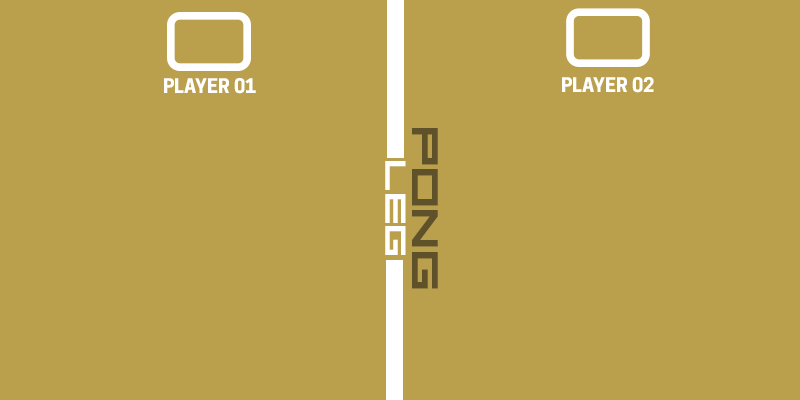
<style>
.page{position:relative;width:800px;height:400px;background:#ba9f4d}
.page>*{position:absolute;margin:0}
.t1{font:19px "CooperHewitt-Bold";color:#ffffff}
.t2{font:50px "SquareSansSerif7";color:#5f522b;text-transform:uppercase;font-weight:bold}
.t3{font:39.4px "SquareSansSerif7";color:#ffffff;text-transform:uppercase;font-weight:bold}
</style>
<div class="page">
<p class="t1" style="left:164px;top:78px;width:92px;height:16px">PLAYER 01</p>
<p class="t1" style="left:562px;top:77px;width:92px;height:16px">PLAYER 02</p>
<p class="t2" style="left:412px;top:128px;width:26px;height:161px;rotate:90deg">pong</p>
<p class="t3" style="left:385px;top:161px;width:21px;height:94px;rotate:90deg">leg</p>
</div>
